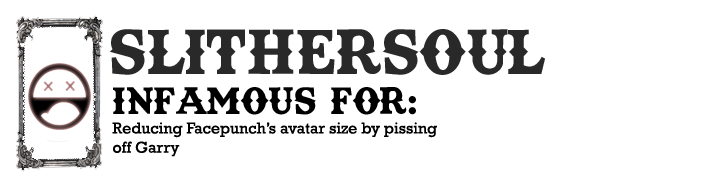
<style>
.page{position:relative;width:728px;height:184px;background:#ffffff}
.page>*{position:absolute;margin:0}
.t1{font:60px "TexasTangoBOLDPERSONALUSE";color:#292929}
.t2{font:36px "TexasTangoBOLDPERSONALUSE";color:#000000}
.t3{font:16px "Rockwell";color:#000000}
</style>
<div class="page">
<p class="t1" style="left:109px;top:29px;width:436px;height:46px">Slithersoul</p>
<p class="t2" style="left:113px;top:87px;width:303px;height:28px">Infamous for:</p>
<p class="t3" style="left:112px;top:122px;width:325px;height:35px">Reducing Facepunch’s avatar size by pissing<br>off Garry</p>
</div>
